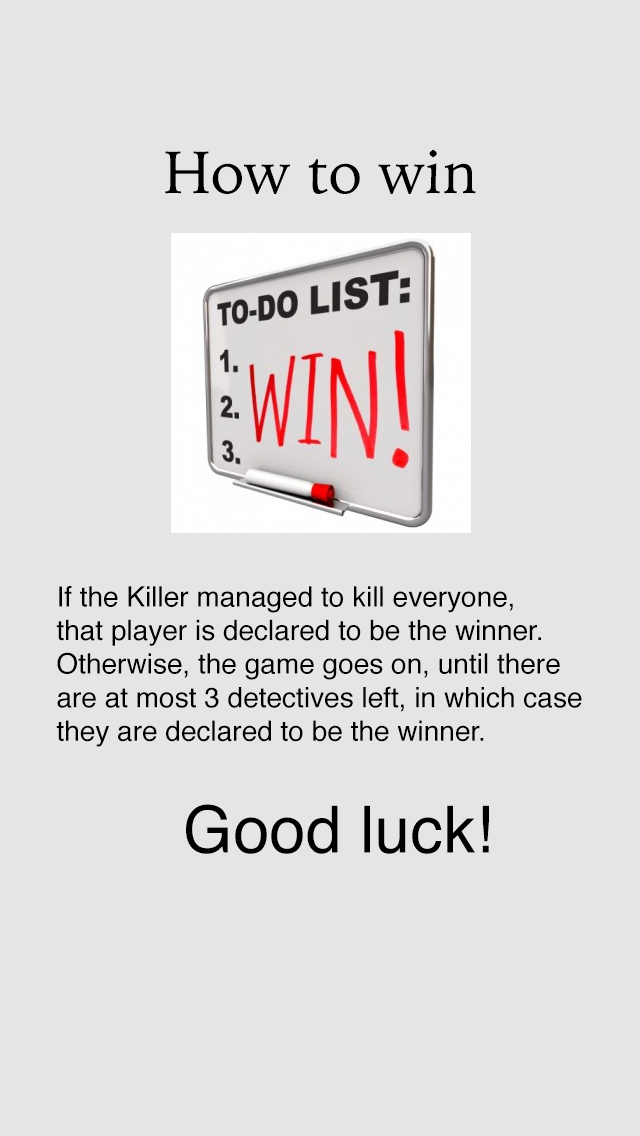
<style>
.page{position:relative;width:640px;height:1136px;background:#e5e5e5}
.page>*{position:absolute;margin:0}
.t1{font:60px "IowanOldStyle-Roman";color:#000000}
.t2{font:28px "Helvetica";color:#000000}
.t3{font:65px "Helvetica";color:#000000}
</style>
<div class="page">
<p class="t1" style="left:165px;top:149px;width:311px;height:45px">How to win</p>
<p class="t2" style="left:56px;top:586px;width:526px;height:268px">If the Killer managed to kill everyone,<br>that player is declared to be the winner.<br>Otherwise, the game goes on, until there<br>are at most 3 detectives left, in which case<br>they are declared to be the winner.<br><br><span class="t3">       Good luck!</span></p>
</div>
